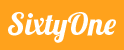
<style>
.page{position:relative;width:124px;height:50px;background:#ffa21c}
.page>*{position:absolute;margin:0}
.t1{font:30.9px "Lobster1.4";color:#ffffff}
</style>
<div class="page">
<p class="t1" style="left:8px;top:12px;width:108px;height:31px">SixtyOne</p>
</div>
